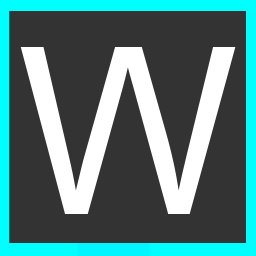
<style>
.page{position:relative;width:256px;height:256px;background:#333333}
.page>*{position:absolute;margin:0}
.t1{font:233px "ArialMT";color:#ffffff}
</style>
<div class="page">
<p class="t1" style="left:20px;top:47px;width:216px;height:167px">W</p>
</div>
